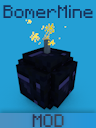
<style>
.page{position:relative;width:96px;height:128px;background:#239fd5}
.page>*{position:absolute;margin:0}
.t1{font:14.6px "Minecraft";color:#192f57}
.t2{font:14.6px "Minecraft";color:#373a4e}
</style>
<div class="page">
<p class="t1" style="left:3px;top:5px;width:90px;height:13px">BomerMine</p>
<p class="t2" style="left:32px;top:114px;width:32px;height:13px">MOD</p>
</div>
